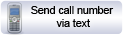
<style>
.page{position:relative;width:123px;height:35px}
.page>*{position:absolute;margin:0}
.t1{font:10.5px "ArialMT";color:#000000}
</style>
<div class="page">
<p class="t1" style="left:31px;top:6px;width:83px;height:21px;text-align:center">Send call number <br>via text</p>
</div>
